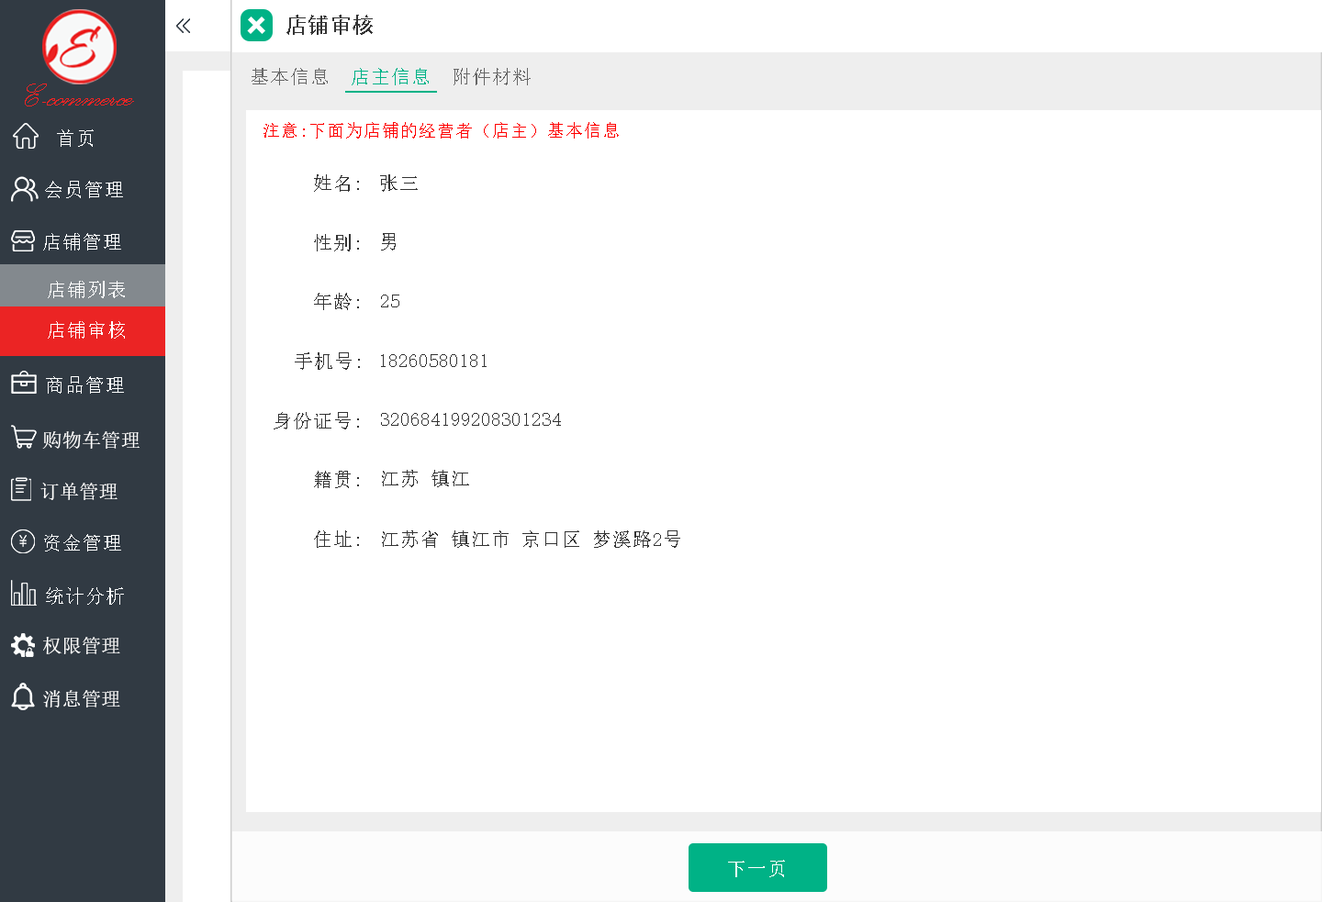
<style>
.page{position:relative;width:1322px;height:902px;background:#ffffff}
.page>*{position:absolute;margin:0}
.t1{font:22px "AdobeHeitiStd-Regular";color:#333333}
.t2{font:19.6px "NSimSun";color:#666666}
.t3{font:19.6px "NSimSun";color:#00b286}
.t4{font:41.1px "PalaceScriptMT";color:#eb2424}
.t5{font:17.1px "NSimSun";color:#ff0000}
.t6{font:19.6px "NSimSun";color:#feffff}
.t7{font:19.6px "NSimSun";color:#333333}
.t8{font:19.6px "NSimSun";color:#ffffff}
.t9{font:19.6px "SimSun";color:#ffffff}
</style>
<div class="page">
<p class="t1" style="left:286px;top:15px;width:87px;height:20px">店铺审核</p>
<p class="t2" style="left:251px;top:68px;width:280px;height:17px">基本信息  <span class="t3">店主信息</span>  附件材料</p>
<p class="t4" style="left:25px;top:84px;width:109px;height:22px">E-commerce</p>
<p class="t5" style="left:263px;top:122px;width:356px;height:17px">注意:下面为店铺的经营者（店主）基本信息</p>
<p class="t6" style="left:57px;top:129px;width:37px;height:18px">首页</p>
<p class="t6" style="left:45px;top:181px;width:78px;height:17px">会员管理</p>
<p class="t7" style="left:314px;top:174px;width:45px;height:18px">姓名:</p>
<p class="t7" style="left:380px;top:174px;width:38px;height:18px">张三</p>
<p class="t6" style="left:43px;top:233px;width:78px;height:18px">店铺管理</p>
<p class="t7" style="left:381px;top:233px;width:15px;height:18px">男</p>
<p class="t7" style="left:314px;top:234px;width:45px;height:17px">性别:</p>
<p class="t8" style="left:48px;top:281px;width:77px;height:17px">店铺列表</p>
<p class="t7" style="left:314px;top:293px;width:45px;height:17px">年龄:</p>
<p class="t7" style="left:381px;top:295px;width:18px;height:12px">25</p>
<p class="t8" style="left:48px;top:321px;width:77px;height:18px">店铺审核</p>
<p class="t7" style="left:295px;top:352px;width:65px;height:18px">手机号:</p>
<p class="t7" style="left:381px;top:354px;width:105px;height:13px">18260580181</p>
<p class="t6" style="left:46px;top:376px;width:78px;height:18px">商品管理</p>
<p class="t7" style="left:274px;top:412px;width:85px;height:18px">身份证号:</p>
<p class="t7" style="left:381px;top:413px;width:180px;height:13px">320684199208301234</p>
<p class="t9" style="left:42px;top:431px;width:98px;height:18px">购物车管理</p>
<p class="t7" style="left:314px;top:471px;width:45px;height:17px">籍贯:</p>
<p class="t7" style="left:382px;top:470px;width:87px;height:17px">江苏 镇江</p>
<p class="t9" style="left:40px;top:483px;width:77px;height:17px">订单管理</p>
<p class="t7" style="left:314px;top:531px;width:45px;height:17px">住址:</p>
<p class="t7" style="left:382px;top:531px;width:298px;height:17px">江苏省 镇江市 京口区 梦溪路2号</p>
<p class="t6" style="left:44px;top:534px;width:77px;height:18px">资金管理</p>
<p class="t6" style="left:46px;top:587px;width:78px;height:18px">统计分析</p>
<p class="t9" style="left:43px;top:637px;width:77px;height:17px">权限管理</p>
<p class="t9" style="left:43px;top:690px;width:77px;height:18px">消息管理</p>
<p class="t8" style="left:728px;top:860px;width:57px;height:17px">下一页</p>
</div>
